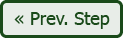
<style>
.page{position:relative;width:123px;height:38px;background:#e8ede8}
.page>*{position:absolute;margin:0}
.t1{font:18px "Tahoma";color:#1a4a1a}
</style>
<div class="page">
<p class="t1" style="left:14px;top:12px;width:96px;height:17px">« Prev. Step</p>
</div>
